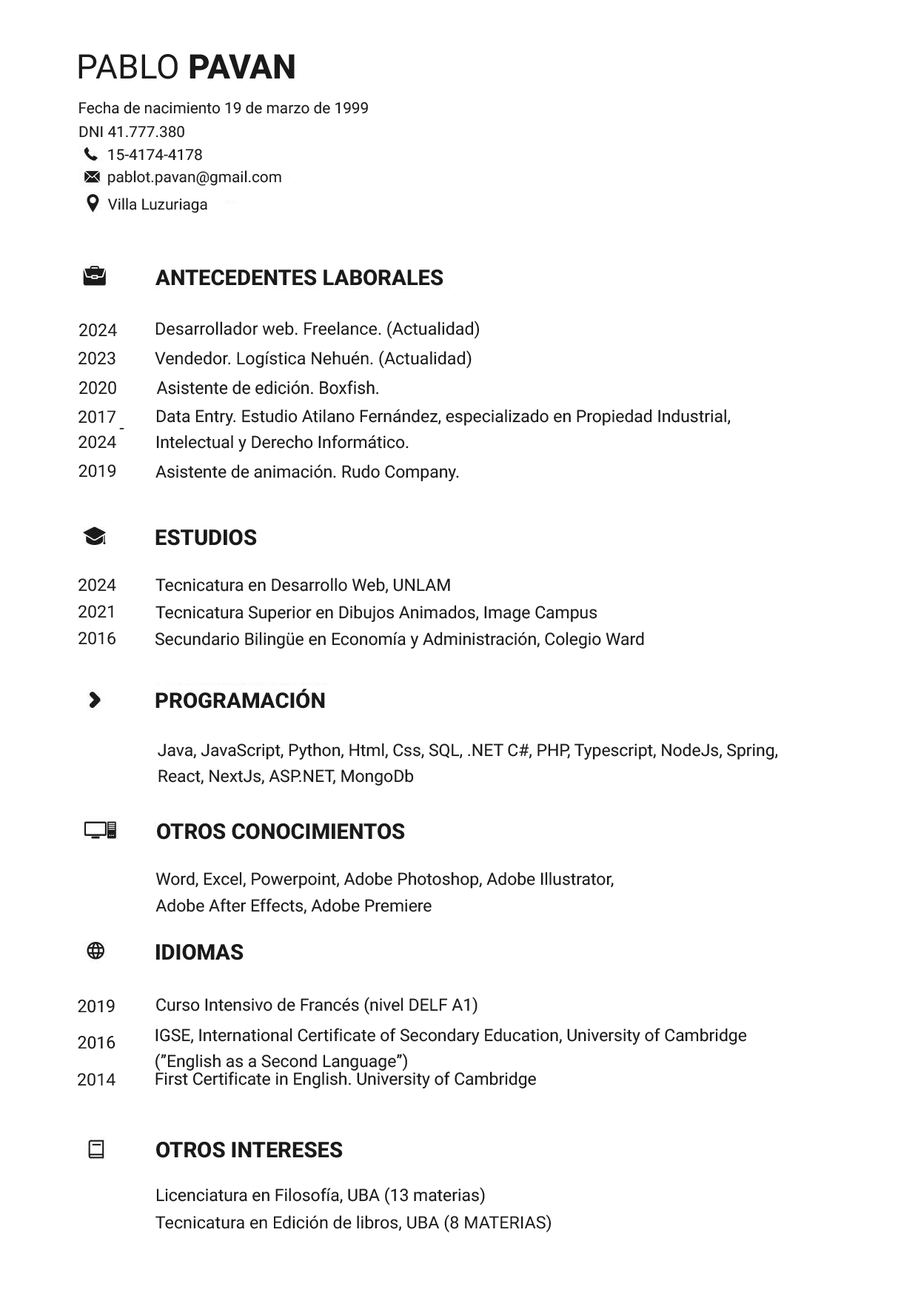
<style>
.page{position:relative;width:918px;height:1298px;background:#ffffff}
.page>*{position:absolute;margin:0}
.t1{font:33.9px "Roboto-Regular";color:#1a1a1a}
.t2{font:33.9px "Roboto-ExtraBold";color:#1a1a1a}
.t3{font:15.4px "Roboto-Regular";color:#1a1a1a}
.t4{font:15.1px "Roboto-Regular";color:#1a1a1a}
.t5{font:21.7px "Roboto-ExtraBold";color:#1a1a1a}
.t6{font:17.4px "Roboto-Regular";color:#1a1a1a}
.t7{font:17.2px "Roboto-Regular";color:#1a1a1a}
.t8{font:17.5px "Roboto-Regular";color:#1a1a1a}
.t9{font:17.5px "Roboto-Regular";color:#1a1a1a;scale:0.97 1}
.t10{font:17px "Roboto-Regular";color:#1a1a1a}
.t11{font:16.9px/26px "Roboto-Regular";color:#1a1a1a}
.t12{font:17.1px "Roboto-Regular";color:#1a1a1a}
.t13{font:21.3px "Roboto-ExtraBold";color:#1a1a1a}
.t14{font:16.9px/26.1px "Roboto-Regular";color:#1a1a1a}
</style>
<div class="page">
<p class="t1" style="left:79px;top:54px;width:216px;height:25px">PABLO <span class="t2">PAVAN</span></p>
<p class="t3" style="left:79px;top:101px;width:289px;height:13px">Fecha de nacimiento 19 de marzo de 1999</p>
<p class="t4" style="left:79px;top:126px;width:105px;height:12px">DNI 41.777.380</p>
<p class="t4" style="left:108px;top:149px;width:94px;height:12px">15-4174-4178</p>
<p class="t4" style="left:108px;top:170px;width:173px;height:16px">pablot.pavan@gmail.com</p>
<p class="t4" style="left:107px;top:198px;width:100px;height:15px">Villa Luzuriaga</p>
<p class="t5" style="left:156px;top:270px;width:288px;height:16px">ANTECEDENTES LABORALES</p>
<p class="t6" style="left:79px;top:324px;width:38px;height:13px">2024</p>
<p class="t7" style="left:156px;top:321px;width:323px;height:18px">Desarrollador web. Freelance. (Actualidad)</p>
<p class="t7" style="left:79px;top:352px;width:37px;height:13px">2023</p>
<p class="t7" style="left:155px;top:350px;width:317px;height:19px">Vendedor. Logística Nehuén. (Actualidad)</p>
<p class="t8" style="left:79px;top:381px;width:37px;height:14px">2020</p>
<p class="t9" style="left:156px;top:380px;width:222px;height:15px">Asistente de edición. Boxfish.</p>
<p class="t10" style="left:79px;top:410px;width:37px;height:14px">2017</p>
<p class="t11" style="left:156px;top:409px;width:575px;height:43px">Data Entry. Estudio Atilano Fernández, especializado en Propiedad Industrial,<br>Intelectual y Derecho Informático.</p>
<p class="t10" style="left:79px;top:436px;width:37px;height:13px">2024</p>
<p class="t7" style="left:119px;top:428px;width:5px;height:2px">-</p>
<p class="t12" style="left:79px;top:464px;width:37px;height:14px">2019</p>
<p class="t12" style="left:156px;top:464px;width:303px;height:18px">Asistente de animación. Rudo Company.</p>
<p class="t5" style="left:156px;top:530px;width:101px;height:16px">ESTUDIOS</p>
<p class="t12" style="left:79px;top:578px;width:37px;height:14px">2024</p>
<p class="t12" style="left:156px;top:578px;width:294px;height:16px">Tecnicatura en Desarrollo Web, UNLAM</p>
<p class="t12" style="left:79px;top:605px;width:34px;height:13px">2021</p>
<p class="t12" style="left:156px;top:605px;width:442px;height:17px">Tecnicatura Superior en Dibujos Animados, Image Campus</p>
<p class="t12" style="left:79px;top:632px;width:37px;height:13px">2016</p>
<p class="t12" style="left:156px;top:632px;width:488px;height:17px">Secundario Bilingüe en Economía y Administración, Colegio Ward</p>
<p class="t13" style="left:156px;top:689px;width:169px;height:20px">PROGRAMACIÓN</p>
<p class="t14" style="left:158px;top:743px;width:620px;height:43px">Java, JavaScript, Python, Html, Css, SQL, .NET C#, PHP, Typescript, NodeJs, Spring, <br>React, NextJs, ASP.NET, MongoDb</p>
<p class="t5" style="left:157px;top:824px;width:248px;height:16px">OTROS CONOCIMIENTOS</p>
<p class="t14" style="left:156px;top:872px;width:458px;height:43px">Word, Excel, Powerpoint, Adobe Photoshop, Adobe Illustrator,<br>Adobe After Effects, Adobe Premiere</p>
<p class="t5" style="left:156px;top:944px;width:88px;height:17px">IDIOMAS</p>
<p class="t10" style="left:78px;top:1000px;width:37px;height:13px">2019</p>
<p class="t12" style="left:156px;top:997px;width:322px;height:18px">Curso Intensivo de Francés (nivel DELF A1)</p>
<p class="t10" style="left:78px;top:1036px;width:38px;height:14px">2016</p>
<p class="t14" style="left:156px;top:1028px;width:591px;height:44px">IGSE, International Certificate of Secondary Education, University of Cambridge<br>(”English as a Second Language”)</p>
<p class="t10" style="left:78px;top:1073px;width:38px;height:14px">2014</p>
<p class="t12" style="left:156px;top:1072px;width:380px;height:17px">First Certificate in English. University of Cambridge</p>
<p class="t5" style="left:156px;top:1142px;width:187px;height:16px">OTROS INTERESES</p>
<p class="t12" style="left:156px;top:1187px;width:329px;height:19px">Licenciatura en Filosofía, UBA (13 materias)</p>
<p class="t12" style="left:156px;top:1215px;width:395px;height:18px">Tecnicatura en Edición de libros, UBA (8 MATERIAS)</p>
</div>
